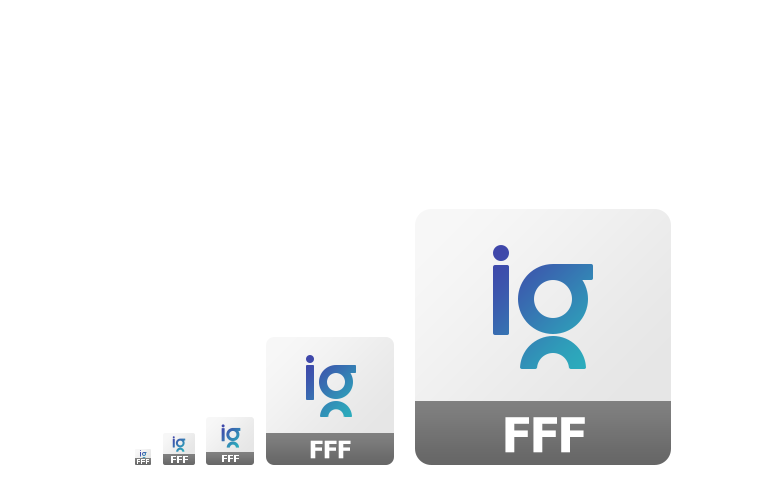
<style>
.page{position:relative;width:768px;height:480px;background:#ffffff}
.page>*{position:absolute;margin:0}
.t1{font:48px "Tahoma-Bold";color:#ffffff}
.t2{font:24px "Tahoma-Bold";color:#ffffff}
.t3{font:10px "Tahoma-Bold";color:#ffffff}
</style>
<div class="page">
<p class="t1" style="left:505px;top:417px;width:80px;height:36px">FFF</p>
<p class="t2" style="left:310px;top:440px;width:41px;height:19px">FFF</p>
<p class="t3" style="left:171px;top:456px;width:17px;height:7px">FFF</p>
<p class="t3" style="left:222px;top:455px;width:17px;height:7px">FFF</p>
</div>
